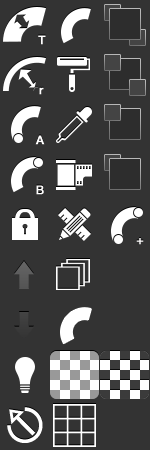
<style>
.page{position:relative;width:150px;height:450px;background:#333333}
.page>*{position:absolute;margin:0}
.t1{font:12px "HelveticaNeue-Medium";color:#fffefe;font-weight:bold}
.t2{font:12px "HelveticaNeue-Medium";font-weight:bold}
.t3{font:67px "Menlo-Regular";color:#ffffff}
</style>
<div class="page">
<p class="t1" style="left:38px;top:35px;width:8px;height:10px">T</p>
<p class="t1" style="left:39px;top:87px;width:5px;height:8px">r</p>
<p class="t1" style="left:35px;top:135px;width:10px;height:10px">A</p>
<p class="t1" style="left:36px;top:185px;width:8px;height:10px">B</p>
<p class="t2" style="left:136px;top:238px;width:8px;height:7px">+</p>
<p class="t3" style="left:7px;top:407px;width:36px;height:36px">⎋</p>
</div>
